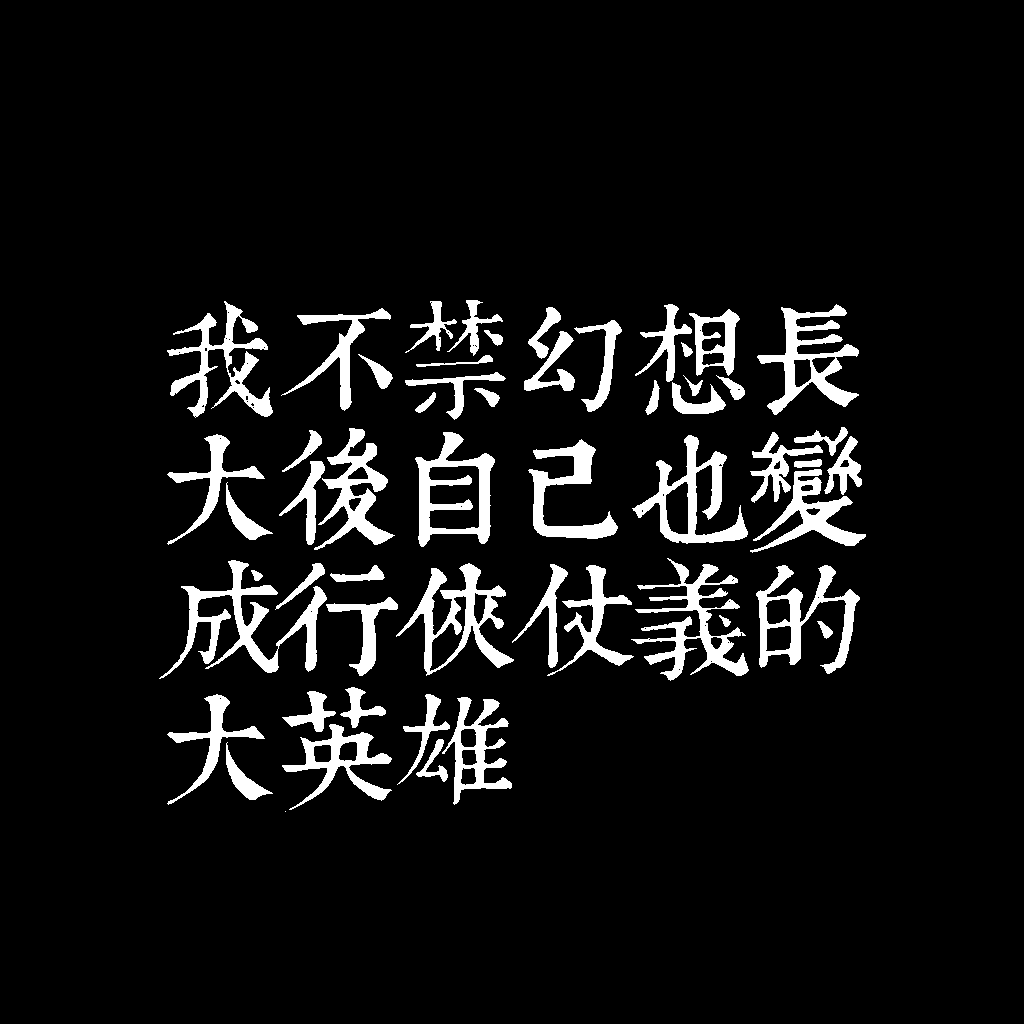
<style>
.page{position:relative;width:1024px;height:1024px;background:#000000}
.page>*{position:absolute;margin:0}
.t1{font:120px/130px "TpldKhangXiDictTrial";letter-spacing:-0.02em;color:#ffffff}
</style>
<div class="page">
<p class="t1" style="left:159px;top:300px;width:707px;height:512px">我不禁幻想長<br>大後自己也變<br>成行俠仗義的<br>大英雄</p>
</div>
